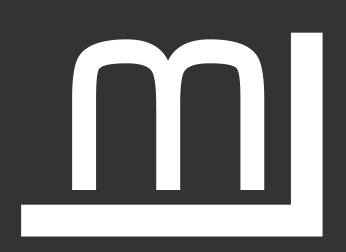
<style>
.page{position:relative;width:346px;height:252px;background:#333333}
.page>*{position:absolute;margin:0}
.t1{font:416.7px "TypoSquareRegularDemo";letter-spacing:0.2em;color:#ffffff}
.t2{font:208.3px "TypoSquareBoldDemo";color:#ffffff}
</style>
<div class="page">
<p class="t1" style="left:21px;top:32px;width:302px;height:205px;rotate:-90deg">L</p>
<p class="t2" style="left:72px;top:39px;width:193px;height:151px">M</p>
</div>
